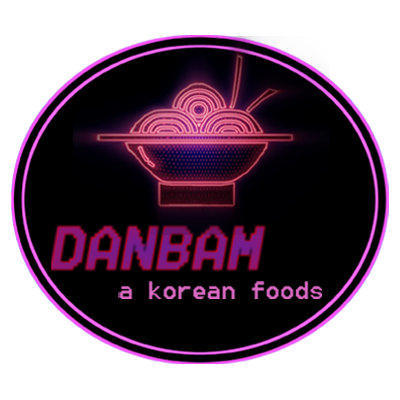
<style>
.page{position:relative;width:400px;height:400px;background:#ffffff}
.page>*{position:absolute;margin:0}
.t1{font:31.3px "8514oem";color:#dd6bc6}
</style>
<div class="page">
<p class="t1" style="left:118px;top:281px;width:204px;height:18px">a korean foods</p>
</div>
